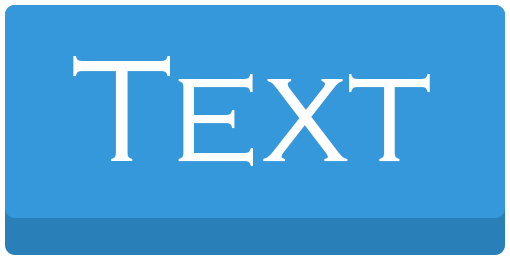
<style>
.page{position:relative;width:510px;height:260px;background:#3498db}
.page>*{position:absolute;margin:0}
.t1{font:150px "CopperplateGothic-Light";color:#ffffff}
</style>
<div class="page">
<p class="t1" style="left:73px;top:56px;width:357px;height:110px">Text</p>
</div>
